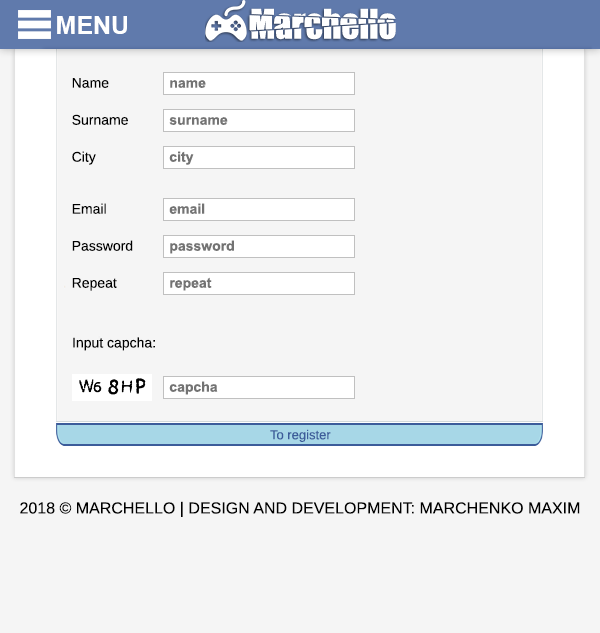
<style>
.page{position:relative;width:600px;height:633px;background:#f5f5f5}
.page>*{position:absolute;margin:0}
.t1{font:25.1px "Arial-BoldMT";color:#ffffff}
.t2{font:14px "WineArial";color:#000000}
.t3{font:14px "Arial-BoldMT";color:#737373}
.t4{font:13px "WineArial";color:#3c5c9a}
.t5{font:16px "WineArial";color:#000000}
</style>
<div class="page">
<p class="t1" style="left:57px;top:16px;width:70px;height:18px">MENU</p>
<p class="t2" style="left:72px;top:78px;width:37px;height:10px">Name</p>
<p class="t3" style="left:170px;top:80px;width:36px;height:8px">name</p>
<p class="t2" style="left:72px;top:114px;width:56px;height:11px">Surname</p>
<p class="t3" style="left:169px;top:117px;width:59px;height:8px">surname</p>
<p class="t2" style="left:72px;top:151px;width:24px;height:14px">City</p>
<p class="t3" style="left:169px;top:151px;width:25px;height:14px">city</p>
<p class="t2" style="left:72px;top:203px;width:34px;height:11px">Email</p>
<p class="t3" style="left:169px;top:203px;width:36px;height:11px">email</p>
<p class="t2" style="left:72px;top:240px;width:61px;height:11px">Password</p>
<p class="t3" style="left:170px;top:240px;width:64px;height:14px">password</p>
<p class="t2" style="left:72px;top:278px;width:45px;height:13px">Repeat</p>
<p class="t3" style="left:170px;top:277px;width:42px;height:14px">repeat</p>
<p class="t2" style="left:73px;top:337px;width:82px;height:14px">Input capcha:</p>
<p class="t3" style="left:169px;top:381px;width:49px;height:14px">capcha</p>
<p class="t4" style="left:270px;top:429px;width:61px;height:13px">To register</p>
<p class="t5" style="left:20px;top:501px;width:560px;height:16px">2018 © MARCHELLO | DESIGN AND DEVELOPMENT: MARCHENKO MAXIM</p>
</div>
